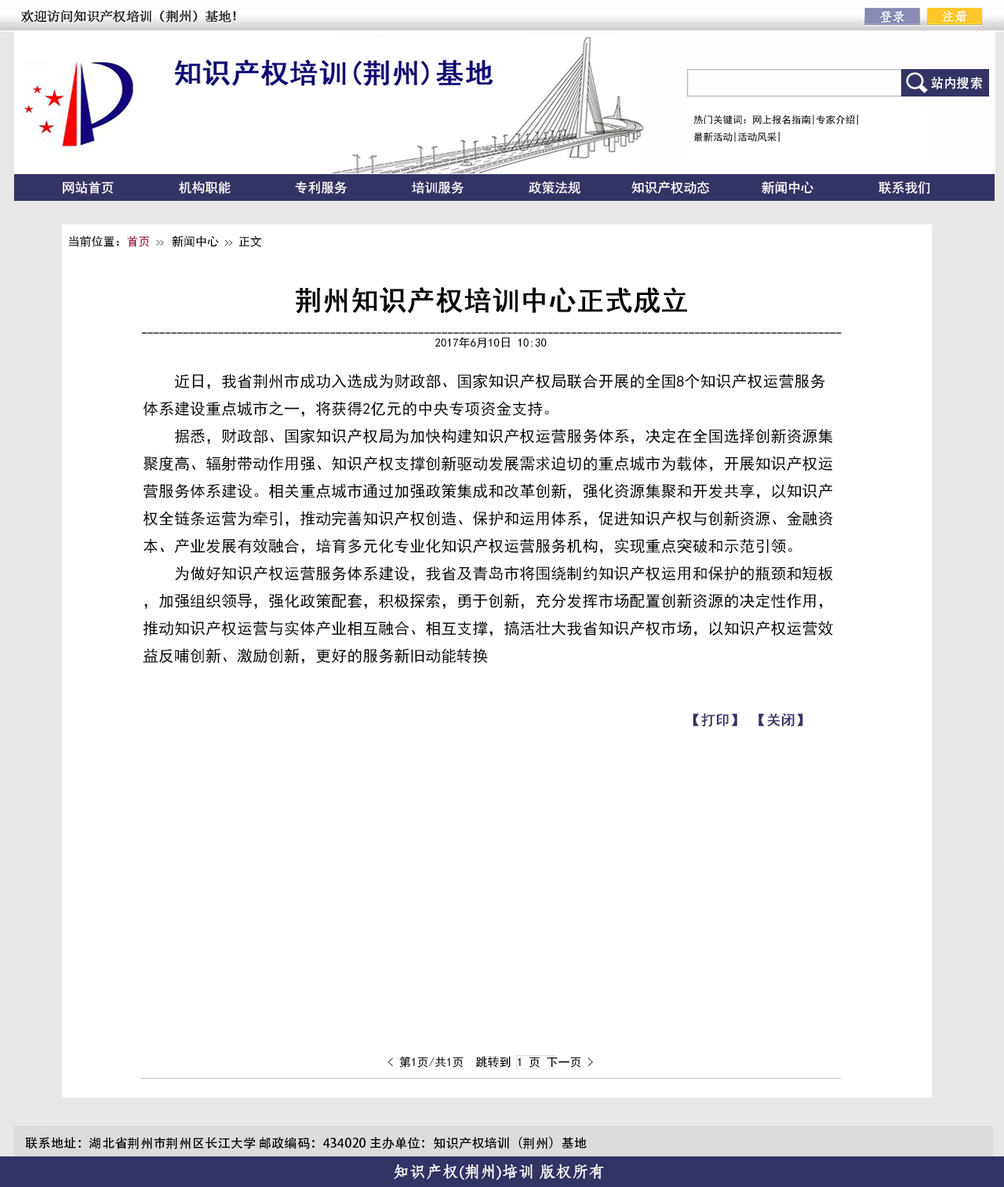
<style>
.page{position:relative;width:1004px;height:1187px;background:#ffffff}
.page>*{position:absolute;margin:0}
.t1{font:13.1px "AdobeHeitiStd-Regular";color:#ffffff}
.t2{font:9.8px "SimHei";color:#040402}
.t3{font:13.1px "SimHei";color:#fffbfc}
.t4{font:11.8px "SimHei";color:#000000}
.t5{font:11.8px "SimHei";color:#990033}
.t6{font:7.8px "SimHei";color:#000000}
.t7{font:27.5px "SimHei";color:#000000;font-weight:bold}
.t8{font:15.7px "SimHei";color:#000000}
.t9{font:14.1px "SimHei";color:#333366;font-weight:bold}
.t10{font:12.5px "AdobeHeitiStd-Regular";color:#000104}
.t11{font:15.6px "STFangsong";color:#fdfdfd;font-weight:bold}
</style>
<div class="page">
<p class="t1" style="left:931px;top:77px;width:51px;height:12px">站内搜索</p>
<p class="t2" style="left:694px;top:115px;width:164px;height:27px">热门关键词：网上报名指南|专家介绍|<br>最新活动|活动风采|</p>
<p class="t3" style="left:63px;top:181px;width:51px;height:13px">网站首页</p>
<p class="t3" style="left:179px;top:181px;width:52px;height:13px">机构职能</p>
<p class="t3" style="left:295px;top:181px;width:52px;height:13px">专利服务</p>
<p class="t3" style="left:412px;top:181px;width:52px;height:13px">培训服务</p>
<p class="t3" style="left:529px;top:181px;width:52px;height:13px">政策法规</p>
<p class="t3" style="left:632px;top:181px;width:77px;height:13px">知识产权动态</p>
<p class="t3" style="left:762px;top:181px;width:52px;height:13px">新闻中心</p>
<p class="t3" style="left:879px;top:181px;width:52px;height:13px">联系我们</p>
<p class="t4" style="left:68px;top:235px;width:194px;height:12px">当前位置：<span class="t5">首页 </span><span class="t6">&gt;&gt;  </span>新闻中心 <span class="t6">&gt;&gt;</span> 正文</p>
<p class="t7" style="left:296px;top:287px;width:391px;height:27px">荆州知识产权培训中心正式成立</p>
<p class="t4" style="left:141px;top:332px;width:701px;height:2px">-----------------------------------------------------------------------------------------------------------------------</p>
<p class="t4" style="left:435px;top:337px;width:112px;height:11px">2017年6月10日 10:30</p>
<p class="t8" style="left:143px;top:374px;width:690px;height:290px">近日，我省荆州市成功入选成为财政部、国家知识产权局联合开展的全国8个知识产权运营服务体系建设重点城市之一，将获得2亿元的中央专项资金支持。<br>    据悉，财政部、国家知识产权局为加快构建知识产权运营服务体系，决定在全国选择创新资源集聚度高、辐射带动作用强、知识产权支撑创新驱动发展需求迫切的重点城市为载体，开展知识产权运营服务体系建设。相关重点城市通过加强政策集成和改革创新，强化资源集聚和开发共享，以知识产权全链条运营为牵引，推动完善知识产权创造、保护和运用体系，促进知识产权与创新资源、金融资本、产业发展有效融合，培育多元化专业化知识产权运营服务机构，实现重点突破和示范引领。<br>    为做好知识产权运营服务体系建设，我省及青岛市将围绕制约知识产权运用和保护的瓶颈和短板，加强组织领导，强化政策配套，积极探索，勇于创新，充分发挥市场配置创新资源的决定性作用，推动知识产权运营与实体产业相互融合、相互支撑，搞活壮大我省知识产权市场，以知识产权运营效益反哺创新、激励创新，更好的服务新旧动能转换</p>
<p class="t9" style="left:693px;top:713px;width:111px;height:14px">【打印】 【关闭】</p>
<p class="t4" style="left:388px;top:1056px;width:205px;height:12px">&lt; 第1页/共1页  跳转到 1 页 下一页 &gt;</p>
<p class="t10" style="left:25px;top:1137px;width:562px;height:13px">联系地址：湖北省荆州市荆州区长江大学 邮政编码：434020 主办单位：知识产权培训（荆州）基地</p>
<p class="t11" style="left:394px;top:1164px;width:210px;height:16px">知识产权(荆州)培训 版权所有</p>
</div>
